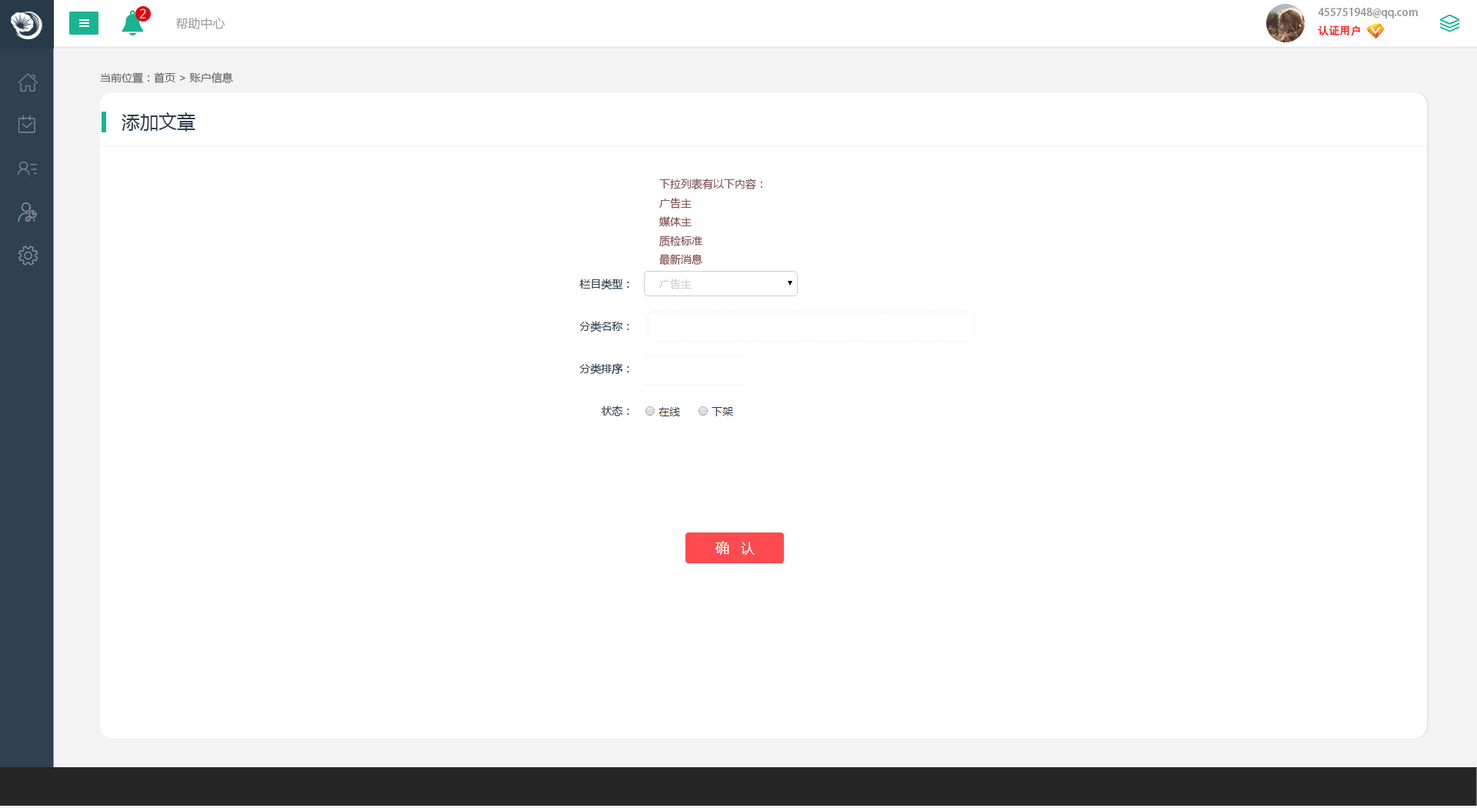
<style>
.page{position:relative;width:1477px;height:808px;background:#ffffff}
.page>*{position:absolute;margin:0}
.t1{font:12.3px "MicrosoftYaHei";color:#ffffff}
.t2{font:12.3px "MicrosoftYaHei";color:#999999}
.t3{font:10.8px/18.5px "AdobeHeitiStd-Regular";color:#999999}
.t4{font:10.8px/18.5px "AdobeHeitiStd-Regular";color:#f61e1e}
.t5{font:10.8px/18.5px "AdobeHeitiStd-Regular";color:#ffffff}
.t6{font:10.8px "MicrosoftYaHei";color:#666666}
.t7{font:18.5px "MicrosoftYaHei";color:#2f4050}
.t8{font:10.8px "MicrosoftYaHei";color:#825050}
.t9{font:10.8px/42.3px "MicrosoftYaHei";color:#2f4050}
.t10{font:10.8px "MicrosoftYaHei";color:#cccccc}
</style>
<div class="page">
<p class="t1" style="left:139px;top:8px;width:7px;height:10px">2</p>
<p class="t2" style="left:176px;top:17px;width:49px;height:13px">帮助中心</p>
<p class="t3" style="left:1317px;top:8px;width:100px;height:28px">455751948@qq.com<br><span class="t4">认证用户               </span><span class="t5">退出</span></p>
<p class="t6" style="left:100px;top:72px;width:133px;height:11px">当前位置：首页 &gt; 账户信息</p>
<p class="t7" style="left:122px;top:112px;width:73px;height:20px">添加文章</p>
<p class="t8" style="left:659px;top:178px;width:103px;height:87px">下拉列表有以下内容：<br>广告主<br>媒体主<br>质检标准<br>最新消息</p>
<p class="t9" style="left:579px;top:278px;width:50px;height:138px;text-align:right">栏目类型：<br>分类名称：<br>分类排序：<br>状态：</p>
<p class="t10" style="left:659px;top:278px;width:32px;height:11px">广告主</p>
</div>
